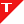
<style>
.page{position:relative;width:24px;height:24px;background:#fefefe}
.page>*{position:absolute;margin:0}
.t1{font:12.8px "ArialRoundedMTBold";color:#fefefe;scale:1.35 1}
</style>
<div class="page">
<p class="t1" style="left:1px;top:3px;width:11px;height:9px">T</p>
</div>
